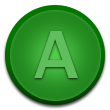
<style>
.page{position:relative;width:110px;height:110px;background:#ffffff}
.page>*{position:absolute;margin:0}
.t1{font:71.3px "FranklinGothic-Medium";color:#61be5d;scale:1.03 1}
</style>
<div class="page">
<p class="t1" style="left:34px;top:31px;width:44px;height:47px">A</p>
</div>
